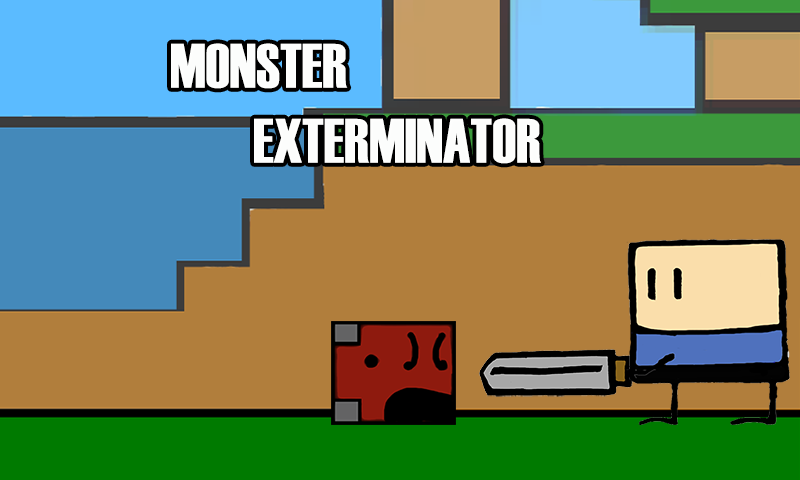
<style>
.page{position:relative;width:800px;height:480px;background:#b17e3c}
.page>*{position:absolute;margin:0}
.t1{font:62.5px "Haettenschweiler";color:#fcfdfc}
.t2{font:58.3px "AppleCasual";color:#fcfdfc}
</style>
<div class="page">
<p class="t1" style="left:171px;top:43px;width:370px;height:121px"><span class="t2">      </span>MONSTER<br>        EXTERMINATOR</p>
</div>
